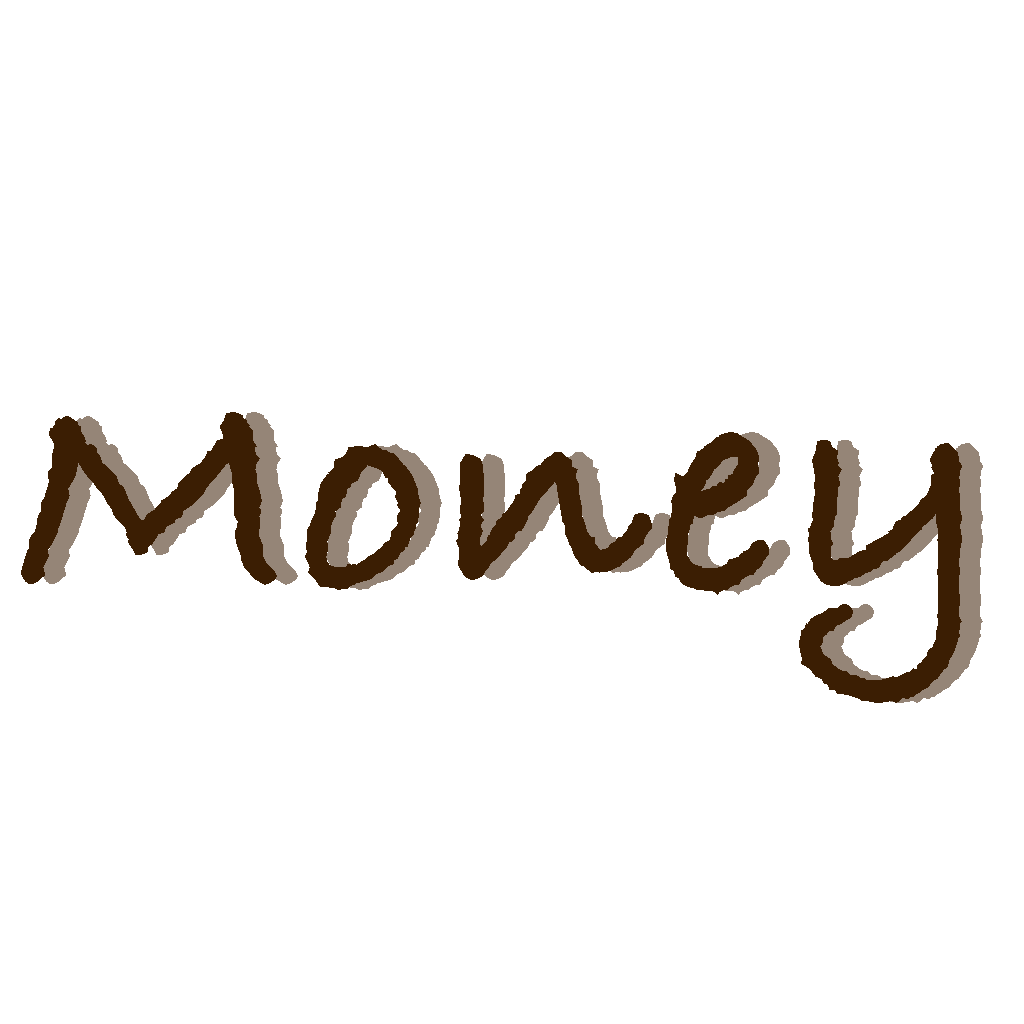
<style>
.page{position:relative;width:1024px;height:1024px;background:#ffffff}
.page>*{position:absolute;margin:0}
.t1{font:314.5px "BradleyHandITCTT-Bold";letter-spacing:0.025em;color:#3b1e03}
.t2{font:314.5px "BradleyHandITCTT-Bold";letter-spacing:0.025em}
</style>
<div class="page">
<p class="t1" style="left:21px;top:412px;width:941px;height:291px">Money</p>
<p class="t2" style="left:42px;top:412px;width:941px;height:291px">Money</p>
</div>
